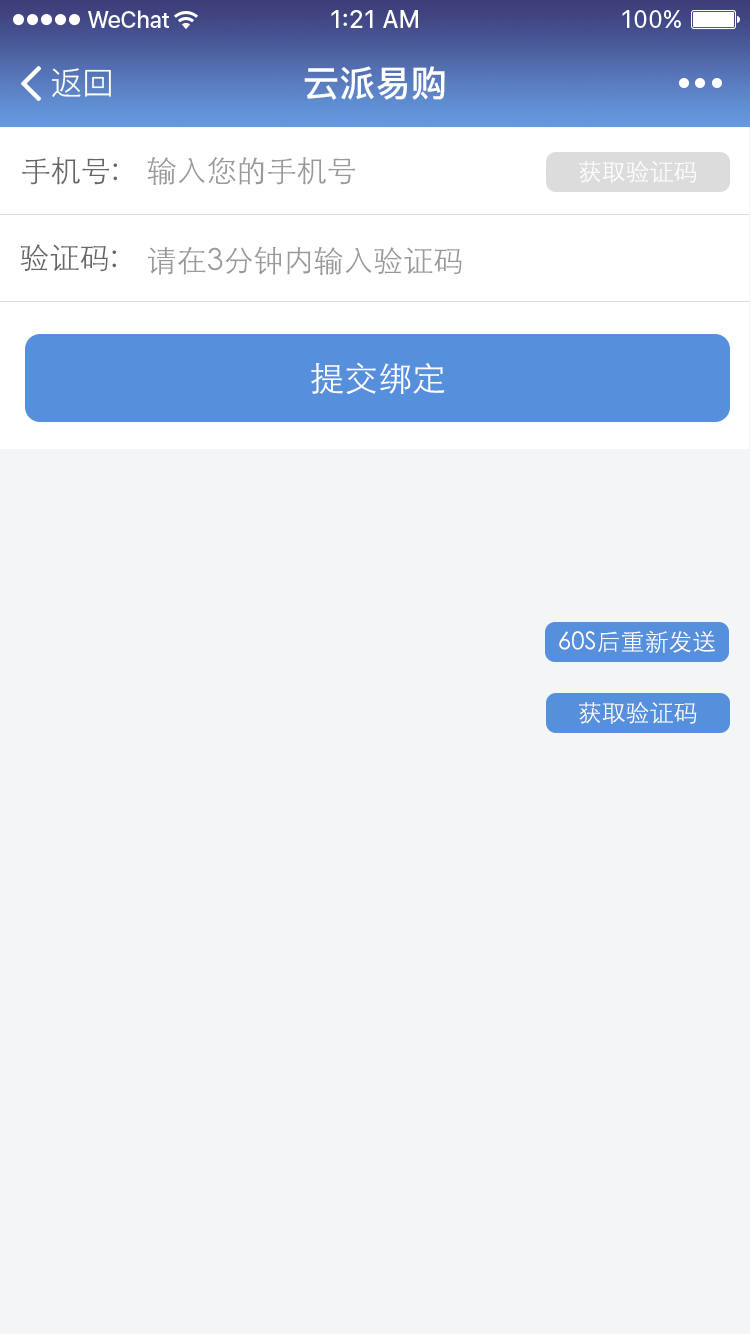
<style>
.page{position:relative;width:750px;height:1334px;background:#f4f5f6}
.page>*{position:absolute;margin:0}
.t1{font:32px "PingFang-SC-Regular";color:#ffffff}
.t2{font:36px "PingFang-SC-Bold";color:#ffffff}
.t3{font:30px "STXihei";color:#666666}
.t4{font:30px "STXihei";color:#999999}
.t5{font:24px "STXihei";color:#ffffff}
.t6{font:34px "STXihei";color:#ffffff}
</style>
<div class="page">
<p class="t1" style="left:52px;top:68px;width:59px;height:29px">返回</p>
<p class="t2" style="left:304px;top:66px;width:141px;height:34px">云派易购</p>
<p class="t3" style="left:22px;top:157px;width:95px;height:28px">手机号:</p>
<p class="t4" style="left:147px;top:156px;width:208px;height:29px">输入您的手机号</p>
<p class="t5" style="left:579px;top:161px;width:118px;height:22px">获取验证码</p>
<p class="t3" style="left:20px;top:244px;width:96px;height:28px">验证码:</p>
<p class="t4" style="left:148px;top:246px;width:314px;height:29px">请在3分钟内输入验证码</p>
<p class="t6" style="left:311px;top:362px;width:134px;height:33px">提交绑定</p>
<p class="t5" style="left:559px;top:630px;width:156px;height:23px">60S后重新发送</p>
<p class="t5" style="left:579px;top:702px;width:118px;height:22px">获取验证码</p>
</div>
